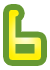
<style>
.page{position:relative;width:50px;height:70px;background:#ffffff}
.page>*{position:absolute;margin:0}
.t1{font:64px "OCRAStd"}
</style>
<div class="page">
<p class="t1" style="left:9px;top:10px;width:32px;height:50px">6</p>
</div>
